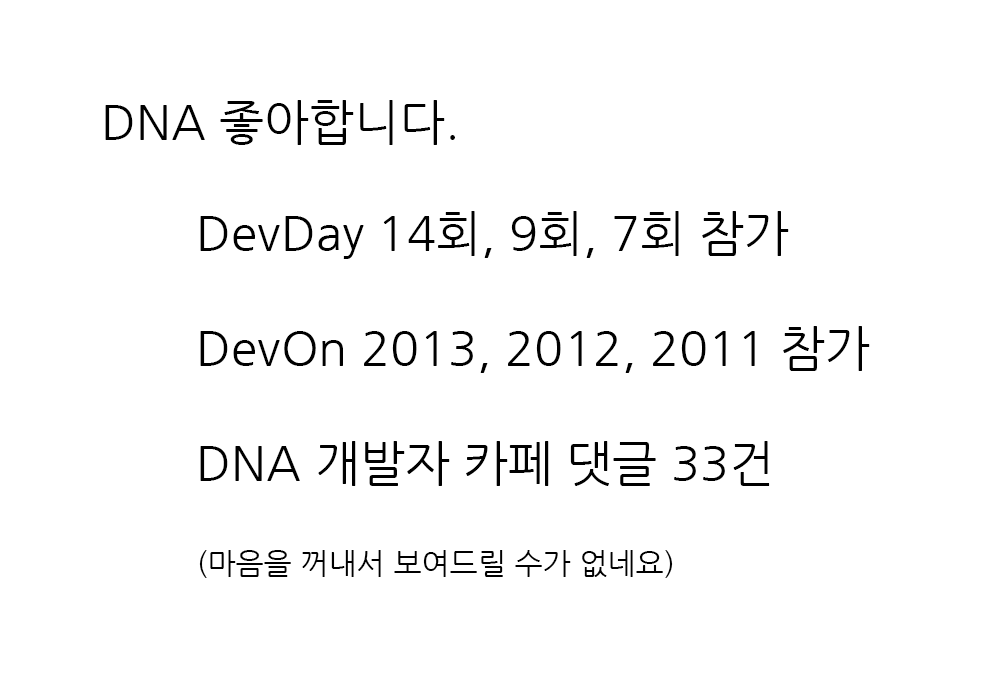
<style>
.page{position:relative;width:1000px;height:685px;background:#ffffff}
.page>*{position:absolute;margin:0}
.t1{font:48px "NanumGothic";color:#000000}
.t2{font:30px "NanumGothic";color:#000000}
</style>
<div class="page">
<p class="t1" style="left:105px;top:100px;width:350px;height:45px">DNA 좋아합니다.</p>
<p class="t1" style="left:199px;top:211px;width:671px;height:367px">DevDay 14회, 9회, 7회 참가 <br><br>DevOn 2013, 2012, 2011 참가<br><br>DNA 개발자 카페 댓글 33건<br><br><span class="t2">(마음을 꺼내서 보여드릴 수가 없네요)</span></p>
</div>
